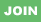
<style>
.page{position:relative;width:41px;height:22px;background:#66bb6a}
.page>*{position:absolute;margin:0}
.t1{font:12px "Arial-Black";color:#ffffff;scale:1.04 1}
</style>
<div class="page">
<p class="t1" style="left:4px;top:6px;width:33px;height:10px">JOIN</p>
</div>
